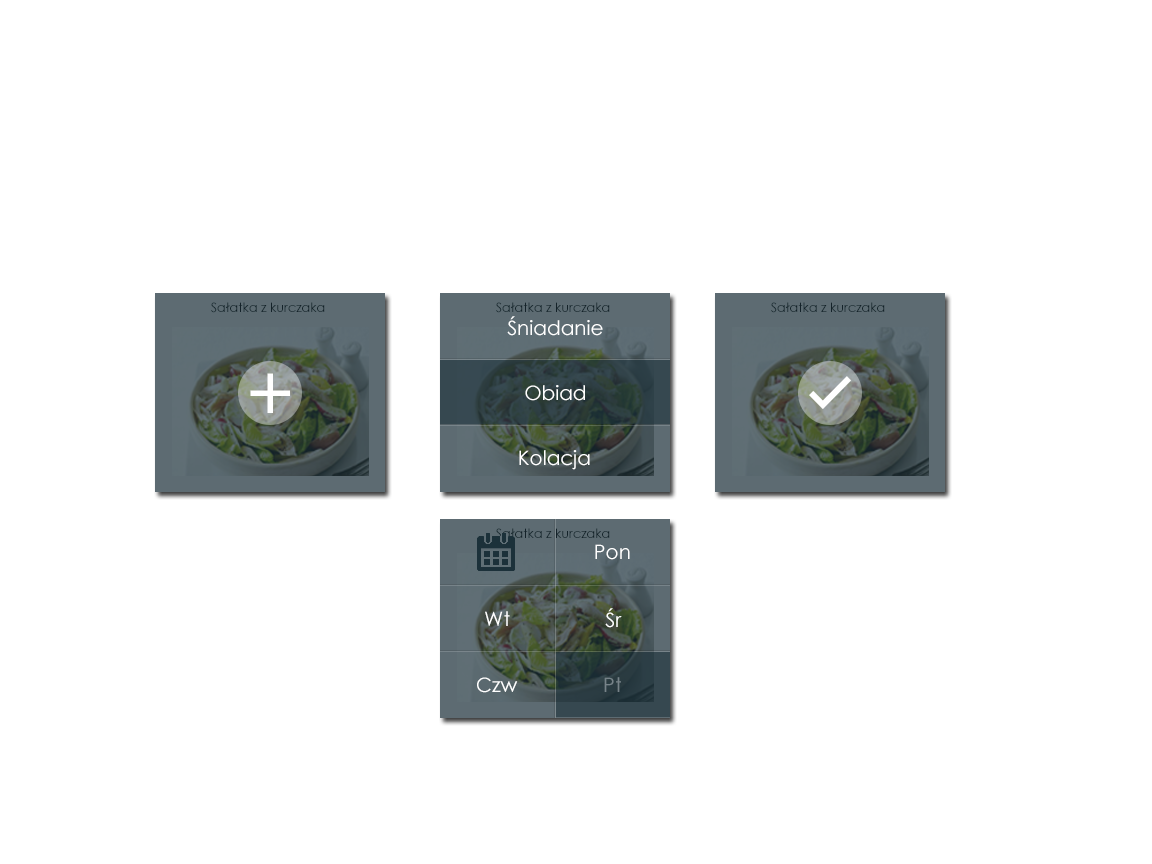
<style>
.page{position:relative;width:1152px;height:864px;background:#ffffff}
.page>*{position:absolute;margin:0}
.t1{font:20px "CenturyGothic";color:#ffffff}
.t2{font:20px "CenturyGothic";color:#778389}
</style>
<div class="page">
<p class="t1" style="left:507px;top:316px;width:96px;height:20px">Śniadanie</p>
<p class="t1" style="left:525px;top:385px;width:60px;height:16px">Obiad</p>
<p class="t1" style="left:519px;top:450px;width:71px;height:20px">Kolacja</p>
<p class="t1" style="left:595px;top:544px;width:35px;height:16px">Pon</p>
<p class="t1" style="left:485px;top:611px;width:25px;height:15px">Wt</p>
<p class="t1" style="left:605px;top:608px;width:17px;height:20px">Śr</p>
<p class="t1" style="left:477px;top:677px;width:41px;height:16px">Czw</p>
<p class="t2" style="left:604px;top:677px;width:17px;height:15px">Pt</p>
</div>
